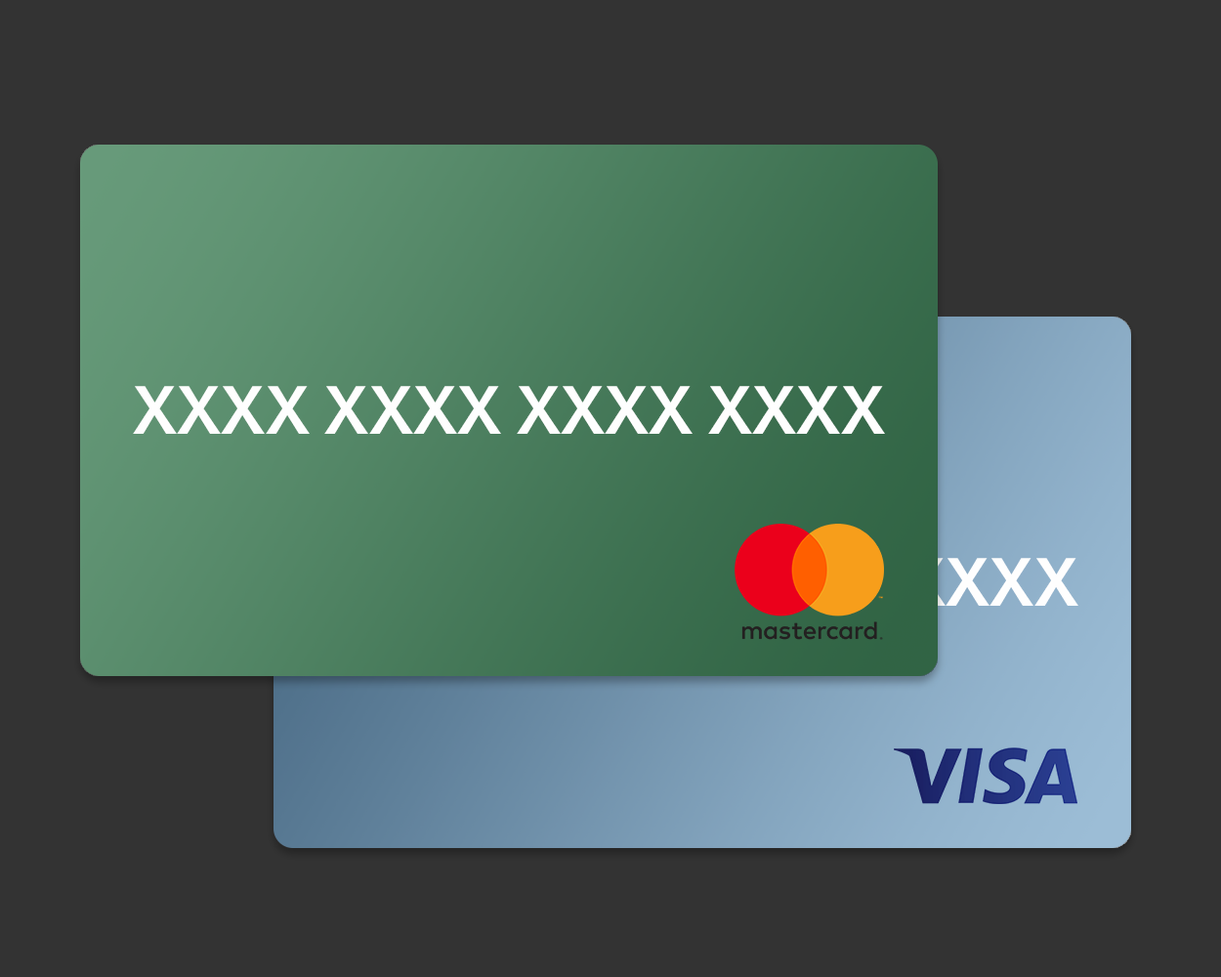
<style>
.page{position:relative;width:1221px;height:977px;background:#333333}
.page>*{position:absolute;margin:0}
.t1{font:67.1px "AvenirNextCyr-Demi";color:#fefefe}
</style>
<div class="page">
<p class="t1" style="left:133px;top:386px;width:752px;height:48px">XXXX XXXX XXXX XXXX</p>
</div>
